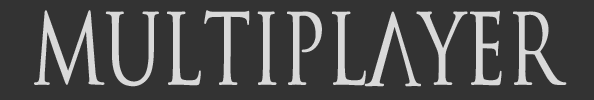
<style>
.page{position:relative;width:594px;height:100px;background:#333333}
.page>*{position:absolute;margin:0}
.t1{font:95.5px "SpaceandAstronomy";color:#d9d9d9;scale:0.73 1}
</style>
<div class="page">
<p class="t1" style="left:34px;top:10px;width:533px;height:77px">Multiplayer</p>
</div>
